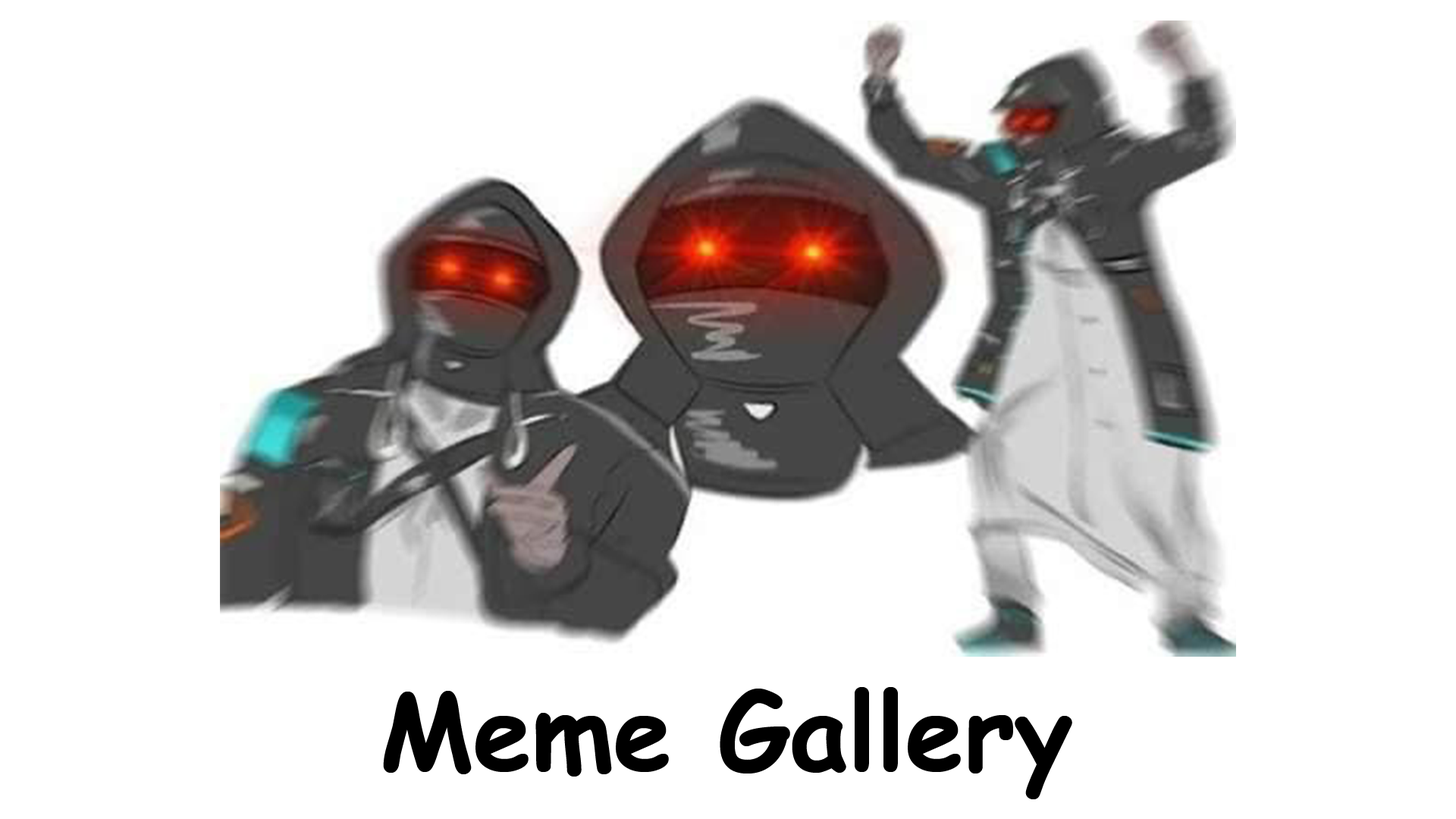
<style>
.page{position:relative;width:1456px;height:819px;background:#ffffff}
.page>*{position:absolute;margin:0}
.t1{font:105.2px "ComicSansMS-Bold";color:#000000}
</style>
<div class="page">
<p class="t1" style="left:383px;top:687px;width:689px;height:112px">Meme Gallery</p>
</div>
